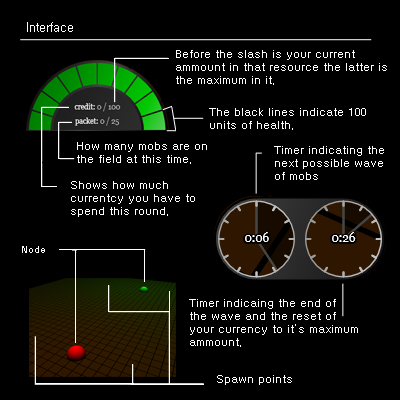
<style>
.page{position:relative;width:400px;height:400px;background:#000000}
.page>*{position:absolute;margin:0}
.t1{font:12px "Gulim";color:#ffffff}
.t2{font:11px "Gulim";color:#ffffff}
.t3{font:10px "Gulim";color:#ffffff}
</style>
<div class="page">
<p class="t1" style="left:27px;top:22px;width:46px;height:10px">Interface</p>
<p class="t2" style="left:176px;top:50px;width:211px;height:35px">Before the slash is your current <br>ammount in that resource the latter is <br>the maximum in it.</p>
<p class="t2" style="left:209px;top:108px;width:157px;height:22px">The black lines indicate 100 <br>units of health.</p>
<p class="t2" style="left:77px;top:142px;width:130px;height:22px">How many mobs are on <br>the field at this time.</p>
<p class="t2" style="left:274px;top:146px;width:110px;height:34px">Timer indicating the <br>next possible wave <br>of mobs</p>
<p class="t2" style="left:71px;top:181px;width:124px;height:36px">Shows how much <br>currentcy you have to <br>spend this round.</p>
<p class="t3" style="left:22px;top:246px;width:23px;height:7px">Node</p>
<p class="t2" style="left:189px;top:299px;width:169px;height:48px">Timer indicaing the end of<br>the wave and the reset of<br>your currency to it’s maximum<br>ammount.</p>
<p class="t2" style="left:217px;top:375px;width:75px;height:10px">Spawn points</p>
</div>
